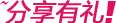
<style>
.page{position:relative;width:116px;height:23px;background:#ffffff}
.page>*{position:absolute;margin:0}
.t1{font:24px "MicrosoftYaHei";color:#df115e;font-weight:bold;font-style:italic}
</style>
<div class="page">
<p class="t1" style="left:5px;top:0px;width:99px;height:24px">分享有礼</p>
</div>
